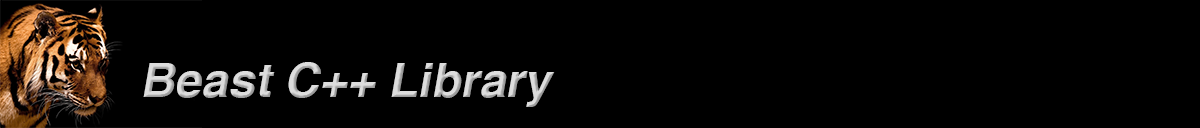
<style>
.page{position:relative;width:1200px;height:128px;background:#000000}
.page>*{position:absolute;margin:0}
.t1{font:48px "Helvetica-Bold";font-style:italic}
</style>
<div class="page">
<p class="t1" style="left:143px;top:62px;width:412px;height:45px">Beast C++ Library</p>
</div>
